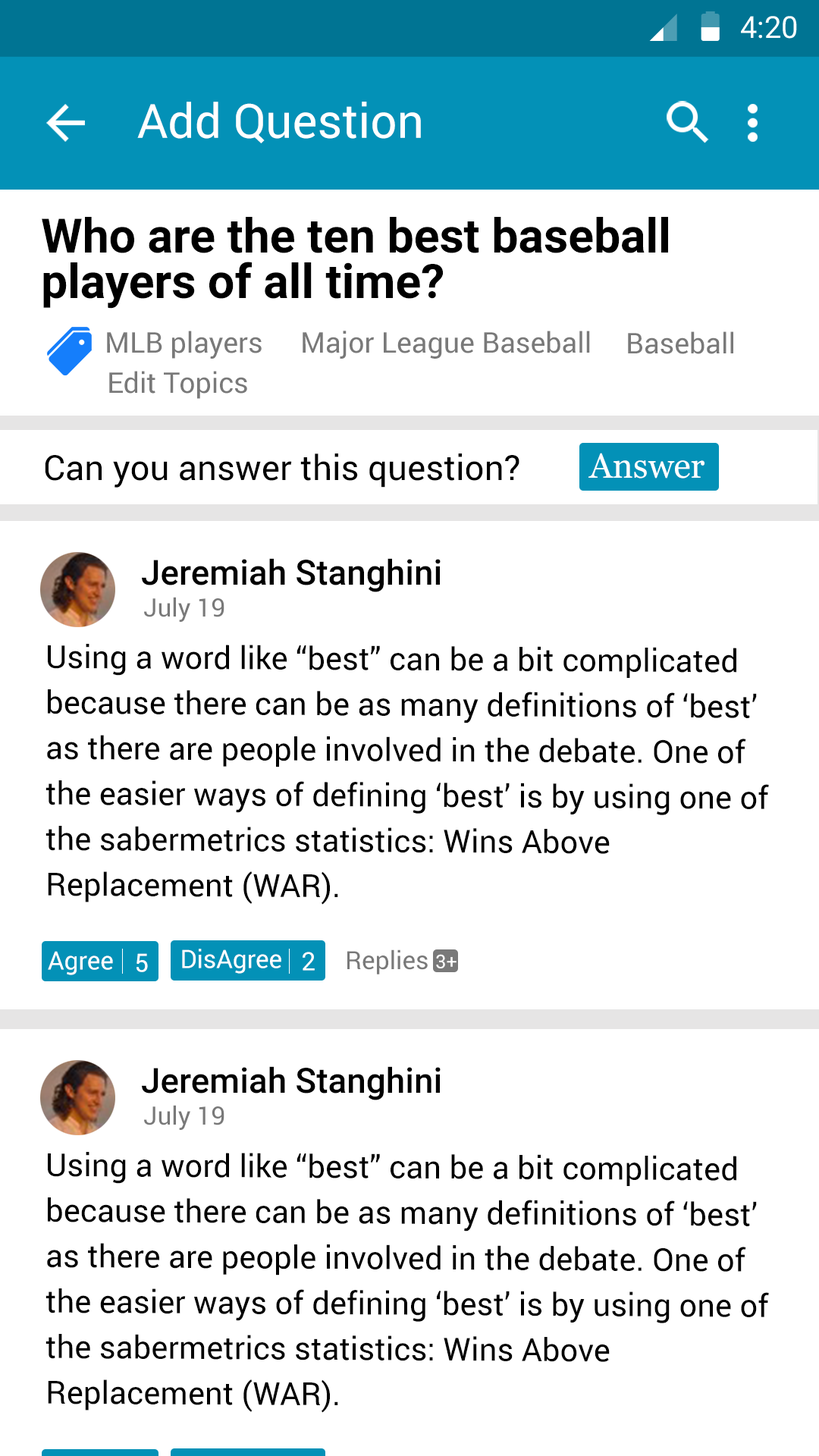
<style>
.page{position:relative;width:819px;height:1456px;background:#ffffff}
.page>*{position:absolute;margin:0}
.t1{font:30.3px "Roboto-Regular";color:#ffffff}
.t2{font:47.2px "Roboto-Regular";color:#ffffff}
.t3{font:47.4px/45.5px "Roboto-Bold";color:#000000}
.t4{font:28.4px "Roboto-Regular";color:#797979}
.t5{font:34.8px "Roboto-Regular";color:#000000}
.t6{font:34.8px "Vani";color:#ffffff}
.t7{font:34.8px "Roboto-Medium";color:#000000}
.t8{font:25.3px "Roboto-Regular";color:#797979}
.t9{font:31.6px/45.5px "Roboto-Regular";color:#000000}
.t10{font:25.3px "Roboto-Regular";color:#ffffff}
.t11{font:19px "Roboto-Regular";color:#ffffff}
</style>
<div class="page">
<p class="t1" style="left:741px;top:16px;width:56px;height:23px">4:20</p>
<p class="t2" style="left:137px;top:102px;width:284px;height:41px">Add Question</p>
<p class="t3" style="left:42px;top:217px;width:626px;height:92px">Who are the ten best baseball <br>players of all time?</p>
<p class="t4" style="left:107px;top:331px;width:155px;height:28px">MLB players</p>
<p class="t4" style="left:303px;top:331px;width:287px;height:28px">Major League Baseball</p>
<p class="t4" style="left:628px;top:331px;width:105px;height:23px">Baseball</p>
<p class="t4" style="left:109px;top:371px;width:138px;height:28px">Edit Topics</p>
<p class="t5" style="left:45px;top:453px;width:474px;height:35px">Can you answer this question?</p>
<p class="t6" style="left:588px;top:453px;width:116px;height:26px">Answer</p>
<p class="t7" style="left:142px;top:558px;width:299px;height:34px">Jeremiah Stanghini</p>
<p class="t8" style="left:144px;top:597px;width:80px;height:25px">July 19</p>
<p class="t9" style="left:45px;top:644px;width:724px;height:261px">Using a word like “best” can be a bit complicated because there can be as many definitions of ‘best’ as there are people involved in the debate. One of the easier ways of defining ‘best’ is by using one of the sabermetrics statistics: Wins Above Replacement (WAR).</p>
<p class="t10" style="left:48px;top:951px;width:65px;height:24px">Agree</p>
<p class="t10" style="left:136px;top:953px;width:12px;height:19px">5</p>
<p class="t10" style="left:182px;top:949px;width:99px;height:25px">DisAgree</p>
<p class="t10" style="left:303px;top:952px;width:12px;height:19px">2</p>
<p class="t8" style="left:347px;top:949px;width:81px;height:25px">Replies</p>
<p class="t11" style="left:436px;top:954px;width:21px;height:14px">3+</p>
<p class="t7" style="left:142px;top:1066px;width:299px;height:34px">Jeremiah Stanghini</p>
<p class="t8" style="left:144px;top:1105px;width:80px;height:25px">July 19</p>
<p class="t9" style="left:45px;top:1152px;width:724px;height:261px">Using a word like “best” can be a bit complicated because there can be as many definitions of ‘best’ as there are people involved in the debate. One of the easier ways of defining ‘best’ is by using one of the sabermetrics statistics: Wins Above Replacement (WAR).</p>
</div>
